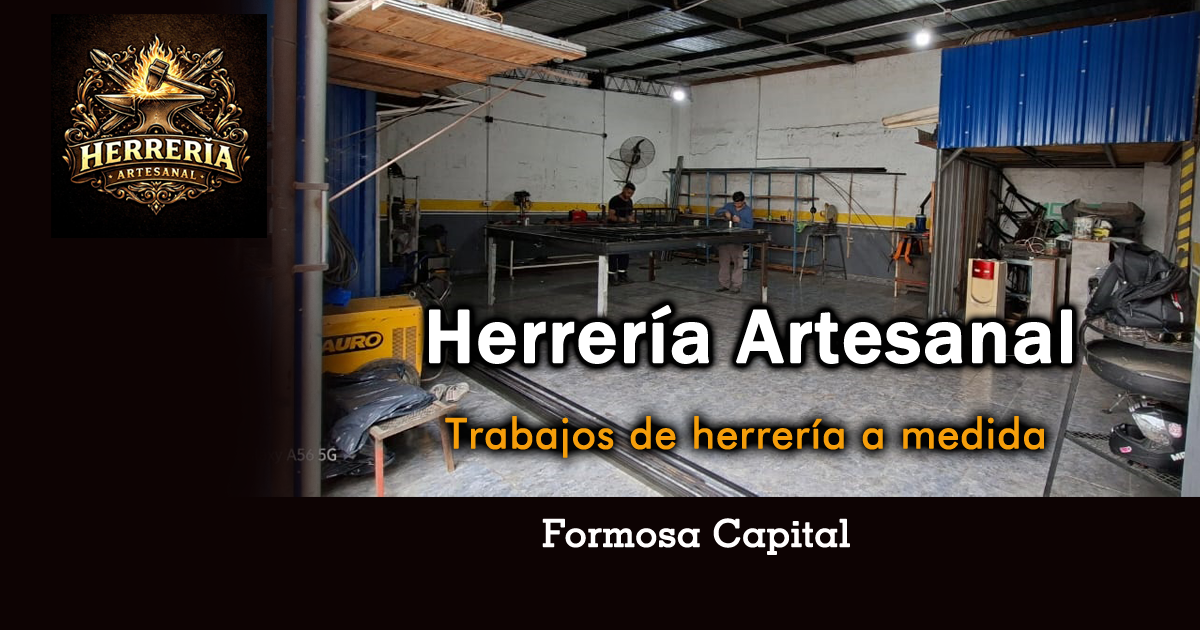
<style>
.page{position:relative;width:1200px;height:630px;background:#0d0303}
.page>*{position:absolute;margin:0}
.t1{font:77.1px "FranklinGothic-Medium";letter-spacing:0.01em;color:#ffffff;font-weight:bold}
.t2{font:41.7px "FuturaBT-Book";letter-spacing:0.01em;color:#f59e0b;font-weight:bold}
.t3{font:37.5px "GeometricSlab703BT-Medium";letter-spacing:0.01em;color:#fffefe;font-weight:bold}
</style>
<div class="page">
<p class="t1" style="left:429px;top:305px;width:643px;height:59px">Herrería Artesanal</p>
<p class="t2" style="left:445px;top:416px;width:599px;height:42px">Trabajos de herrería a medida</p>
<p class="t3" style="left:542px;top:518px;width:308px;height:37px">Formosa Capital</p>
</div>
